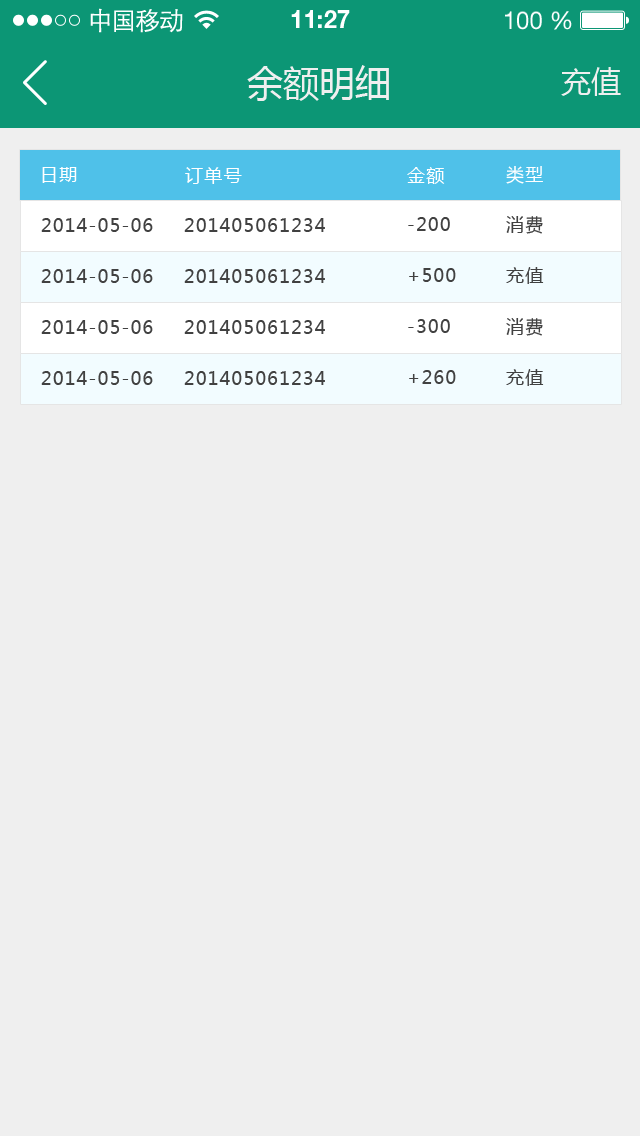
<style>
.page{position:relative;width:640px;height:1136px;background:#efefef}
.page>*{position:absolute;margin:0}
.t1{font:25px "STXihei";letter-spacing:-0.045em;color:#fefefe}
.t2{font:24.6px "HelveticaNeueLTPro-Bd";color:#ffffff}
.t3{font:24.6px "HelveticaNeueLTStd-Roman";color:#ffffff}
.t4{font:36px "MicrosoftYaHei";color:#efefef}
.t5{font:30px "MicrosoftYaHei";color:#efefef}
.t6{font:18px "MicrosoftYaHei";letter-spacing:0.075em;color:#ffffff}
.t7{font:18px "MicrosoftYaHei";letter-spacing:0.075em;color:#414141}
</style>
<div class="page">
<p class="t1" style="left:90px;top:8px;width:93px;height:25px">中国移动</p>
<p class="t2" style="left:291px;top:10px;width:59px;height:18px">11:27</p>
<p class="t3" style="left:505px;top:11px;width:67px;height:19px">100 %</p>
<p class="t4" style="left:247px;top:65px;width:142px;height:36px">余额明细</p>
<p class="t5" style="left:561px;top:67px;width:60px;height:29px">充值</p>
<p class="t6" style="left:42px;top:167px;width:35px;height:16px">日期</p>
<p class="t6" style="left:185px;top:167px;width:57px;height:17px">订单号</p>
<p class="t6" style="left:407px;top:167px;width:38px;height:17px">金额</p>
<p class="t6" style="left:506px;top:166px;width:37px;height:18px">类型</p>
<p class="t7" style="left:41px;top:218px;width:112px;height:14px">2014-05-06</p>
<p class="t7" style="left:184px;top:218px;width:141px;height:14px">201405061234</p>
<p class="t7" style="left:408px;top:217px;width:42px;height:14px">-200</p>
<p class="t7" style="left:506px;top:216px;width:37px;height:18px">消费</p>
<p class="t7" style="left:41px;top:269px;width:112px;height:14px">2014-05-06</p>
<p class="t7" style="left:184px;top:269px;width:141px;height:14px">201405061234</p>
<p class="t7" style="left:409px;top:268px;width:47px;height:14px">+500</p>
<p class="t7" style="left:506px;top:267px;width:38px;height:17px">充值</p>
<p class="t7" style="left:506px;top:318px;width:37px;height:18px">消费</p>
<p class="t7" style="left:41px;top:320px;width:112px;height:14px">2014-05-06</p>
<p class="t7" style="left:184px;top:320px;width:141px;height:14px">201405061234</p>
<p class="t7" style="left:408px;top:319px;width:42px;height:14px">-300</p>
<p class="t7" style="left:41px;top:371px;width:112px;height:14px">2014-05-06</p>
<p class="t7" style="left:184px;top:371px;width:141px;height:14px">201405061234</p>
<p class="t7" style="left:409px;top:370px;width:47px;height:14px">+260</p>
<p class="t7" style="left:506px;top:369px;width:38px;height:17px">充值</p>
</div>
